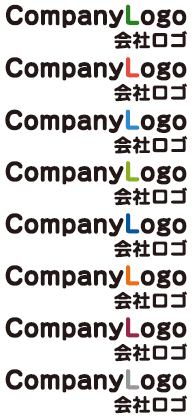
<style>
.page{position:relative;width:196px;height:416px;background:#ffffff}
.page>*{position:absolute;margin:0}
.t1{font:24px "Jun501Pro-Bold";color:#231815;font-weight:bold}
.t2{font:24px "Jun501Pro-Bold";color:#288321;font-weight:bold}
.t3{font:18px "Jun501Pro-Bold";color:#231815;font-weight:bold}
.t4{font:24px "Jun501Pro-Bold";color:#e94b41;font-weight:bold}
.t5{font:24px "Jun501Pro-Bold";color:#2f8ace;font-weight:bold}
.t6{font:24px "Jun501Pro-Bold";color:#8cb11c;font-weight:bold}
.t7{font:24px "Jun501Pro-Bold";color:#01589a;font-weight:bold}
.t8{font:24px "Jun501Pro-Bold";color:#ed6f14;font-weight:bold}
.t9{font:24px "Jun501Pro-Bold";color:#9b2748;font-weight:bold}
.t10{font:24px "Jun501Pro-Bold";color:#999999;font-weight:bold}
</style>
<div class="page">
<p class="t1" style="left:6px;top:4px;width:181px;height:24px">Company<span class="t2">L</span>ogo</p>
<p class="t3" style="left:114px;top:30px;width:73px;height:19px">会社ロゴ</p>
<p class="t1" style="left:5px;top:57px;width:182px;height:24px">Company<span class="t4">L</span>ogo</p>
<p class="t3" style="left:114px;top:83px;width:74px;height:19px">会社ロゴ</p>
<p class="t1" style="left:5px;top:109px;width:182px;height:24px">Company<span class="t5">L</span>ogo</p>
<p class="t3" style="left:114px;top:135px;width:74px;height:19px">会社ロゴ</p>
<p class="t1" style="left:5px;top:161px;width:182px;height:24px">Company<span class="t6">L</span>ogo</p>
<p class="t3" style="left:114px;top:187px;width:74px;height:19px">会社ロゴ</p>
<p class="t1" style="left:5px;top:213px;width:182px;height:24px">Company<span class="t7">L</span>ogo</p>
<p class="t3" style="left:114px;top:239px;width:74px;height:19px">会社ロゴ</p>
<p class="t1" style="left:5px;top:265px;width:182px;height:24px">Company<span class="t8">L</span>ogo</p>
<p class="t3" style="left:114px;top:291px;width:74px;height:19px">会社ロゴ</p>
<p class="t1" style="left:5px;top:317px;width:182px;height:24px">Company<span class="t9">L</span>ogo</p>
<p class="t3" style="left:114px;top:343px;width:74px;height:19px">会社ロゴ</p>
<p class="t1" style="left:5px;top:369px;width:182px;height:24px">Company<span class="t10">L</span>ogo</p>
<p class="t3" style="left:114px;top:395px;width:74px;height:19px">会社ロゴ</p>
</div>
